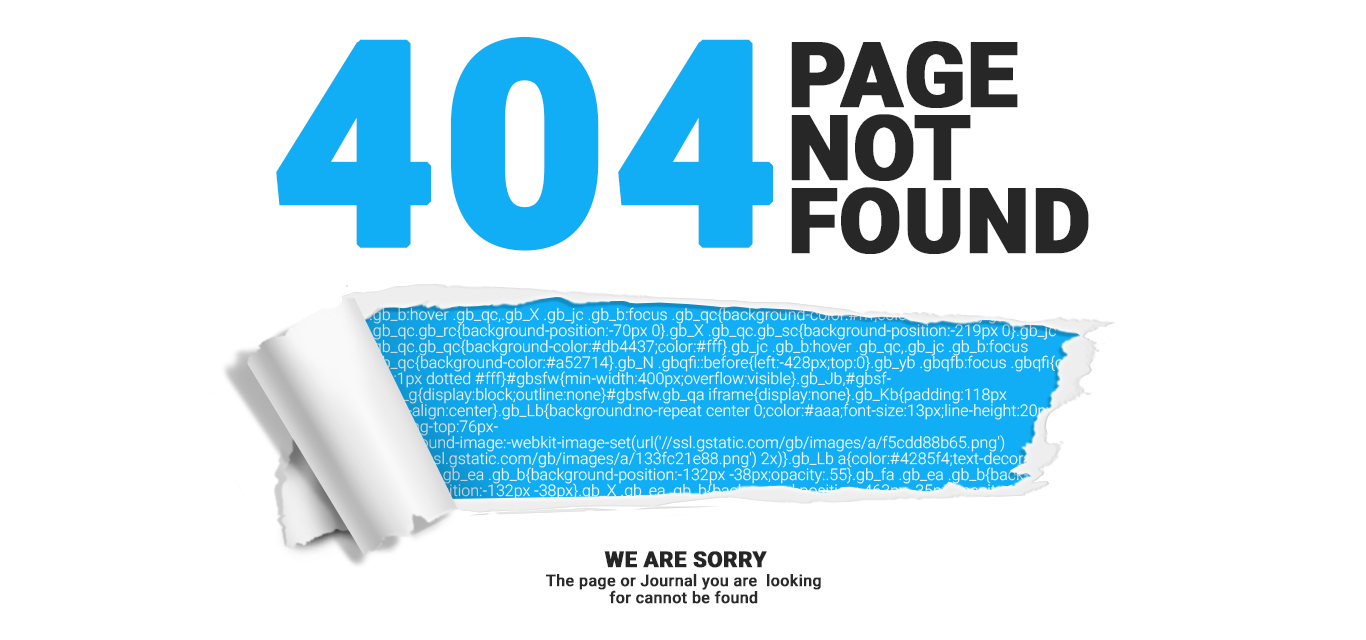
<style>
.page{position:relative;width:1366px;height:640px;background:#ffffff}
.page>*{position:absolute;margin:0}
.t1{font:282px "Roboto-Black";color:#11aef5;text-transform:uppercase;font-weight:bold}
.t2{font:90px/73px "Roboto-Black";color:#272727;text-transform:uppercase;font-weight:bold}
.t3{font:22px "Roboto-Black";color:#262626;text-transform:uppercase;font-weight:bold}
.t4{font:16px/17px "Roboto-Medium";color:#2a2a2a;font-weight:bold}
</style>
<div class="page">
<p class="t1" style="left:276px;top:36px;width:497px;height:215px">404</p>
<p class="t2" style="left:791px;top:41px;width:298px;height:213px">Page <br>Not<br>Found</p>
<p class="t3" style="left:604px;top:551px;width:163px;height:17px">we are sorry</p>
<p class="t4" style="left:546px;top:574px;width:275px;height:30px;text-align:center">The page or Journal you are  looking <br>for cannot be found</p>
</div>
